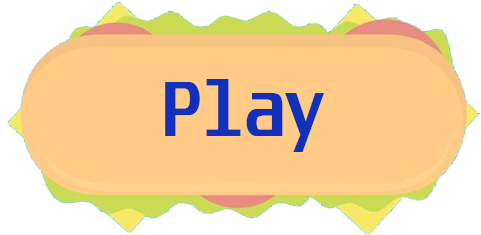
<style>
.page{position:relative;width:481px;height:235px;background:#ffcb87}
.page>*{position:absolute;margin:0}
.t1{font:66.7px "Unispace-Bold";color:#1231bb}
</style>
<div class="page">
<p class="t1" style="left:165px;top:79px;width:160px;height:73px">Play</p>
</div>
